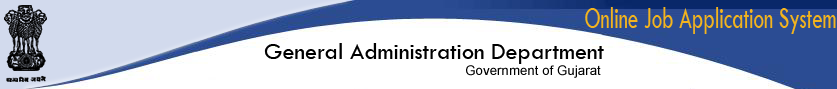
<style>
.page{position:relative;width:837px;height:89px;background:#ffffff}
.page>*{position:absolute;margin:0}
.t1{font:32px "TwCenMT-Regular";color:#f3b41e;scale:0.65 1}
.t2{font:24px "TwCenMT-Regular";color:#000000}
.t3{font:13.3px "ArialMT";color:#000000}
</style>
<div class="page">
<p class="t1" style="left:585px;top:7px;width:251px;height:27px">Online Job Application System</p>
<p class="t2" style="left:264px;top:43px;width:340px;height:21px">General Administration Department</p>
<p class="t3" style="left:466px;top:65px;width:135px;height:13px">Government of Gujarat</p>
</div>
